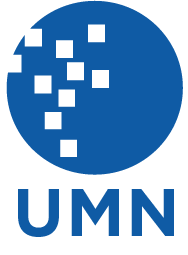
<style>
.page{position:relative;width:188px;height:255px;background:#0f5ba5}
.page>*{position:absolute;margin:0}
.t1{font:67.1px "Gotham-Bold";letter-spacing:0.025em;color:#0f5ba5}
</style>
<div class="page">
<p class="t1" style="left:18px;top:189px;width:156px;height:48px">UMN</p>
</div>
